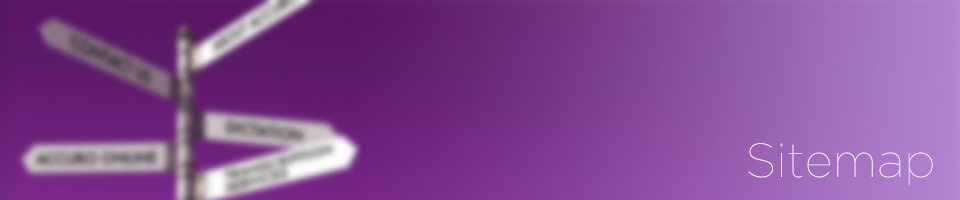
<style>
.page{position:relative;width:960px;height:200px}
.page>*{position:absolute;margin:0}
.t1{font:48px "Gotham-Thin";color:#ffffff}
</style>
<div class="page">
<p class="t1" style="left:748px;top:143px;width:185px;height:42px">Sitemap</p>
</div>
